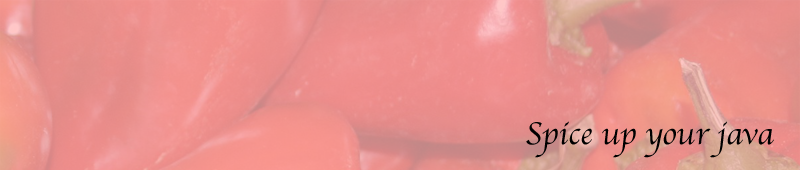
<style>
.page{position:relative;width:800px;height:170px}
.page>*{position:absolute;margin:0}
.t1{font:32.5px "Apple-Chancery";color:#000000}
</style>
<div class="page">
<p class="t1" style="left:526px;top:121px;width:248px;height:37px">Spice up your java</p>
</div>
